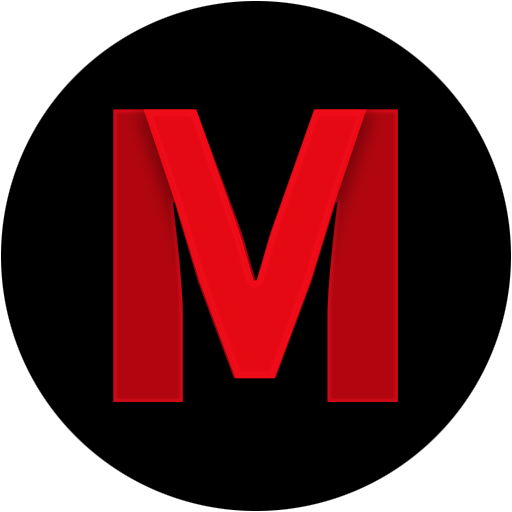
<style>
.page{position:relative;width:512px;height:512px;background:#000000}
.page>*{position:absolute;margin:0}
.t1{font:450px "SourceSansRoman-Black";font-weight:bold}
</style>
<div class="page">
<p class="t1" style="left:113px;top:109px;width:285px;height:293px">M</p>
</div>
